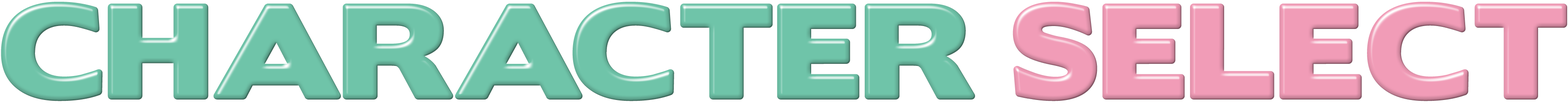
<style>
.page{position:relative;width:1568px;height:105px;background:#ffffff}
.page>*{position:absolute;margin:0}
.t1{font:122.6px "BorisBlackBloxx";color:#6fc4a9}
.t2{font:122.6px "BorisBlackBloxx";color:#f19cb7}
</style>
<div class="page">
<p class="t1" style="left:1px;top:2px;width:1566px;height:100px">CHARACTER <span class="t2">SELECT</span></p>
</div>
